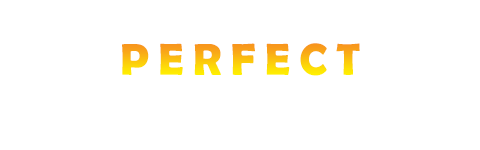
<style>
.page{position:relative;width:480px;height:150px;background:#ffffff}
.page>*{position:absolute;margin:0}
.t1{font:45px "BerlinSansFBDemi-Bold";letter-spacing:0.2em}
</style>
<div class="page">
<p class="t1" style="left:122px;top:43px;width:238px;height:33px">PERFECT</p>
</div>
